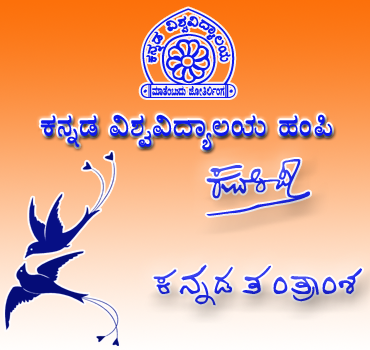
<style>
.page{position:relative;width:370px;height:350px}
.page>*{position:absolute;margin:0}
.t1{font:125.6px "AA";color:#0d18eb}
.t2{font:33.8px "Maruthi03";color:#0d18eb}
.t3{font:80px "KVP";color:#1d27ec}
.t4{font:140px "KVP";color:#1d27ec}
</style>
<div class="page">
<p class="t1" style="left:140px;top:8px;width:96px;height:90px">A</p>
<p class="t2" style="left:40px;top:114px;width:292px;height:37px">PÀ£ÀßqÀ «±Àé«zÁå®AiÀÄ ºÀA¦</p>
<p class="t3" style="left:153px;top:159px;width:209px;height:147px;text-align:center"><span class="t4">A<br></span>BCD  EFGFH</p>
</div>
